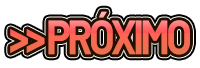
<style>
.page{position:relative;width:200px;height:68px;background:#ffffff}
.page>*{position:absolute;margin:0}
.t1{font:48.3px "Barlow-Bold";letter-spacing:-0.09em;color:#fc6b53;scale:0.85 1}
</style>
<div class="page">
<p class="t1" style="left:10px;top:11px;width:180px;height:44px">&gt;&gt; PRÓXIMO</p>
</div>
